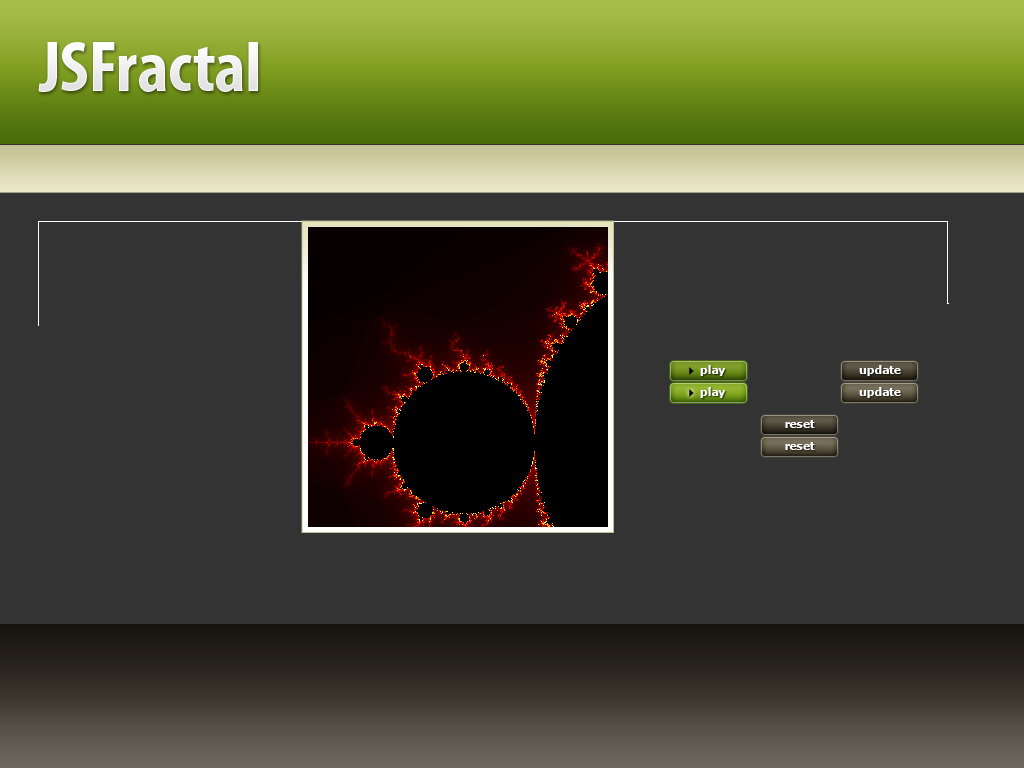
<style>
.page{position:relative;width:1024px;height:768px;background:#333333}
.page>*{position:absolute;margin:0}
.t1{font:72px "MyriadPro-BoldCond";color:#ffffff}
.t2{font:11px "Verdana-Bold";letter-spacing:-0.025em;color:#ffffff}
</style>
<div class="page">
<p class="t1" style="left:38px;top:42px;width:220px;height:50px">JSFractal</p>
<p class="t2" style="left:700px;top:365px;width:26px;height:11px">play</p>
<p class="t2" style="left:859px;top:365px;width:42px;height:11px">update</p>
<p class="t2" style="left:700px;top:387px;width:26px;height:11px">play</p>
<p class="t2" style="left:859px;top:387px;width:42px;height:11px">update</p>
<p class="t2" style="left:785px;top:420px;width:30px;height:8px">reset</p>
<p class="t2" style="left:785px;top:442px;width:30px;height:8px">reset</p>
</div>
